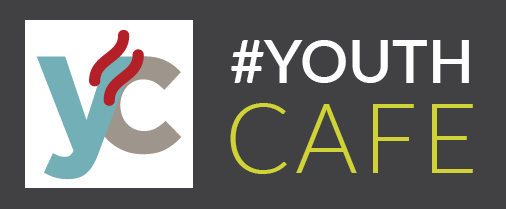
<style>
.page{position:relative;width:506px;height:209px;background:#414042}
.page>*{position:absolute;margin:0}
.t1{font:59.7px "Lato-Semibold";color:#fdfdfd}
.t2{font:96.1px "Lato-Light";letter-spacing:0.05em;color:#cfd335}
</style>
<div class="page">
<p class="t1" style="left:231px;top:40px;width:238px;height:43px">#YOUTH</p>
<p class="t2" style="left:230px;top:103px;width:243px;height:71px">CAFE</p>
</div>
